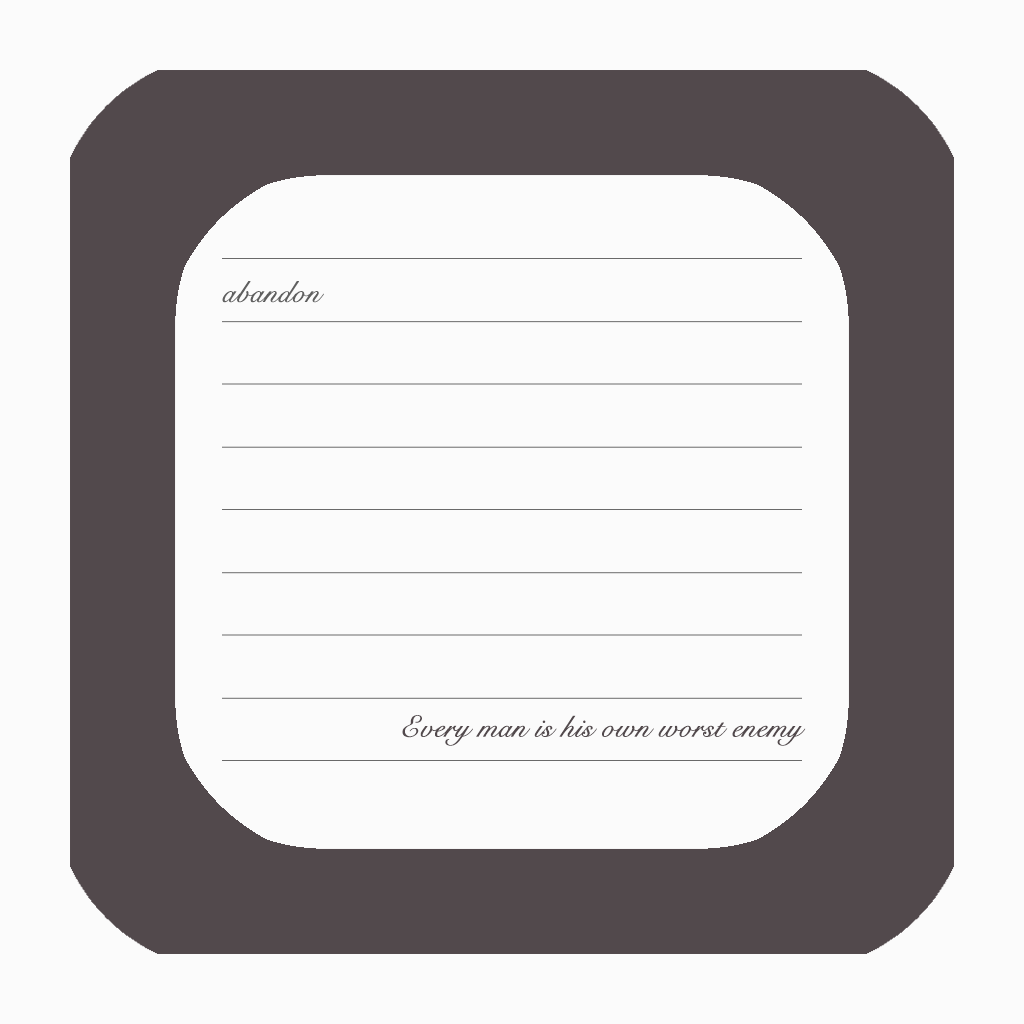
<style>
.page{position:relative;width:1024px;height:1024px;background:#fbfbfb}
.page>*{position:absolute;margin:0}
.t1{font:29.7px "SnellRoundhand";color:#5f5f5f;font-weight:bold}
.t2{font:29.7px "SnellRoundhand";color:#52494c;font-weight:bold}
</style>
<div class="page">
<p class="t1" style="left:222px;top:281px;width:102px;height:22px">abandon</p>
<p class="t2" style="left:402px;top:715px;width:404px;height:31px">Every man is his own worst enemy</p>
</div>
